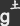
<style>
.page{position:relative;width:20px;height:26px;background:#333333}
.page>*{position:absolute;margin:0}
.t1{font:12px "DFKaiShu-SB-Estd-BF";color:#ececec;font-weight:bold}
.t2{font:18px "ArialMT";color:#ececec;font-weight:bold}
</style>
<div class="page">
<p class="t1" style="left:10px;top:0px;width:11px;height:10px">土</p>
<p class="t2" style="left:0px;top:12px;width:10px;height:15px">g</p>
</div>
